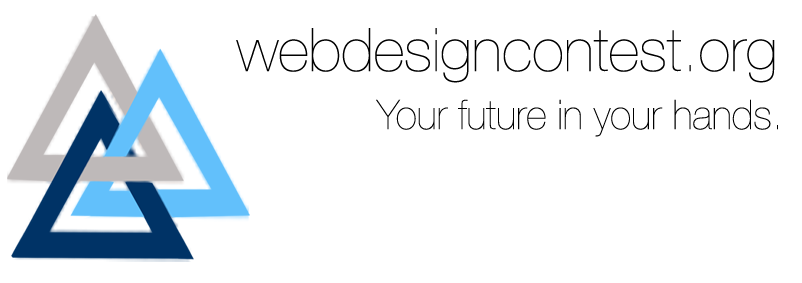
<style>
.page{position:relative;width:802px;height:283px;background:#ffffff}
.page>*{position:absolute;margin:0}
.t1{font:60px "HelveticaNeue-UltraLight";color:#000000}
.t2{font:41px "HelveticaNeue-UltraLight";color:#000000}
</style>
<div class="page">
<p class="t1" style="left:236px;top:28px;width:539px;height:55px">webdesigncontest.org</p>
<p class="t2" style="left:376px;top:99px;width:402px;height:38px">Your future in your hands.</p>
</div>
